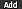
<style>
.page{position:relative;width:22px;height:9px;background:#333333}
.page>*{position:absolute;margin:0}
.t1{font:8px "KohinoorBangla-Regular";color:#ffffff}
</style>
<div class="page">
<p class="t1" style="left:4px;top:1px;width:13px;height:7px">Add</p>
</div>
